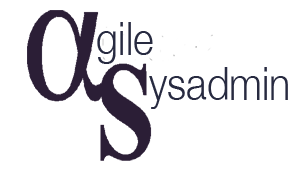
<style>
.page{position:relative;width:295px;height:175px;background:#ffffff}
.page>*{position:absolute;margin:0}
.t1{font:46.4px "HelveticaNeue-Light";color:#272a40;scale:0.85 1}
</style>
<div class="page">
<p class="t1" style="left:97px;top:22px;width:56px;height:42px">gile</p>
<p class="t1" style="left:149px;top:67px;width:139px;height:42px">ysadmin</p>
</div>
